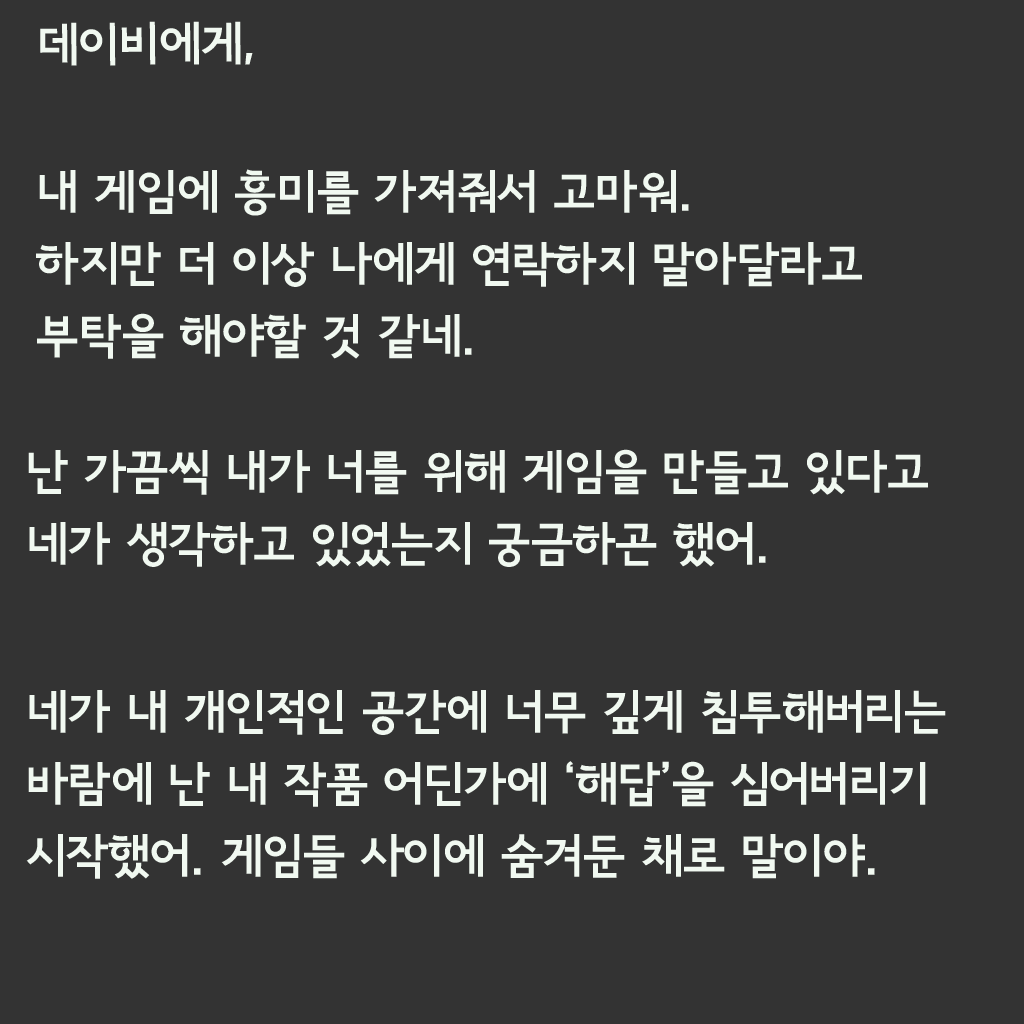
<style>
.page{position:relative;width:1024px;height:1024px;background:#333333}
.page>*{position:absolute;margin:0}
.t1{font:47px "SeoulNamsanEB";color:#f1f9f1}
.t2{font:47px/72px "SeoulNamsanEB";color:#f1f9f1}
</style>
<div class="page">
<p class="t1" style="left:40px;top:21px;width:213px;height:45px">데이비에게,</p>
<p class="t2" style="left:36px;top:169px;width:826px;height:190px">내 게임에 흥미를 가져줘서 고마워.<br>하지만 더 이상 나에게 연락하지 말아달라고 부탁을 해야할 것 같네.</p>
<p class="t2" style="left:28px;top:449px;width:900px;height:118px">난 가끔씩 내가 너를 위해 게임을 만들고 있다고 네가 생각하고 있었는지 궁금하곤 했어.</p>
<p class="t2" style="left:26px;top:690px;width:920px;height:189px">네가 내 개인적인 공간에 너무 깊게 침투해버리는 바람에 난 내 작품 어딘가에 ‘해답’을 심어버리기 시작했어. 게임들 사이에 숨겨둔 채로 말이야.</p>
</div>
